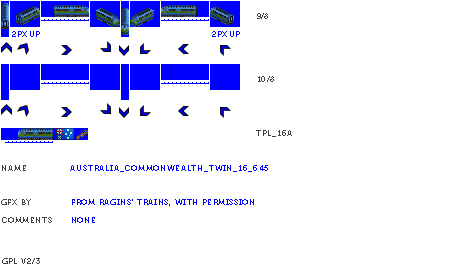
<style>
.page{position:relative;width:450px;height:280px;background:#ffffff}
.page>*{position:absolute;margin:0}
.t1{font:8px "Museo700-Regular";color:#404040}
.t2{font:8px "Museo700-Regular";color:#0000ff;text-transform:uppercase}
.t3{font:8px "Museo700-Regular";letter-spacing:0.075em;color:#404040}
.t4{font:8px "Museo700-Regular";letter-spacing:0.075em;color:#404040;text-transform:uppercase}
.t5{font:8px "Museo700-Regular";letter-spacing:0.075em;color:#0000ff;text-transform:uppercase}
</style>
<div class="page">
<p class="t1" style="left:257px;top:13px;width:11px;height:6px">9/8</p>
<p class="t2" style="left:12px;top:31px;width:28px;height:6px">2px up</p>
<p class="t2" style="left:212px;top:31px;width:28px;height:6px">2px up</p>
<p class="t3" style="left:258px;top:76px;width:16px;height:6px">10/8</p>
<p class="t4" style="left:256px;top:130px;width:36px;height:7px">tpl_16a</p>
<p class="t4" style="left:2px;top:165px;width:24px;height:6px">name</p>
<p class="t5" style="left:70px;top:165px;width:198px;height:7px">Australia_Commonwealth_Twin_16_645</p>
<p class="t4" style="left:1px;top:199px;width:30px;height:6px">gfx by</p>
<p class="t5" style="left:72px;top:199px;width:182px;height:7px">from ragins' trains, with permission</p>
<p class="t4" style="left:2px;top:217px;width:50px;height:6px">comments</p>
<p class="t5" style="left:72px;top:217px;width:23px;height:6px">none</p>
<p class="t4" style="left:2px;top:258px;width:38px;height:6px">gpl v2/3</p>
</div>
